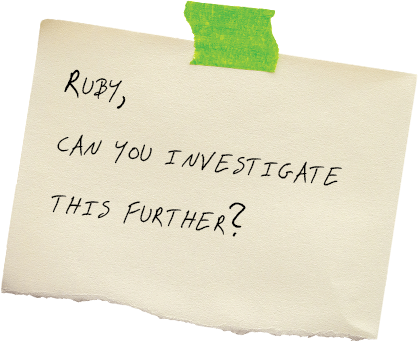
<style>
.page{position:relative;width:418px;height:342px;background:#ffffff}
.page>*{position:absolute;margin:0}
.t1{font:60px/60px "Snake";color:#000000;font-variant:small-caps}
</style>
<div class="page">
<p class="t1" style="left:51px;top:69px;width:291px;height:168px;text-align:justify;rotate:7deg">Ruby,<br>can you investigate<br>this further?</p>
</div>
